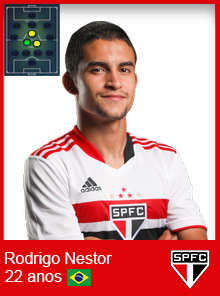
<style>
.page{position:relative;width:220px;height:296px;background:#ffffff}
.page>*{position:absolute;margin:0}
.t1{font:16px "ArialMT";color:#ffffff}
</style>
<div class="page">
<p class="t1" style="left:5px;top:252px;width:107px;height:15px">Rodrigo Nestor</p>
<p class="t1" style="left:5px;top:270px;width:57px;height:12px">22 anos</p>
</div>
